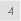
<style>
.page{position:relative;width:21px;height:21px;background:#e0e0e0}
.page>*{position:absolute;margin:0}
.t1{font:10.7px "Arimo";color:#787878;scale:1.11 1}
</style>
<div class="page">
<p class="t1" style="left:8px;top:7px;width:5px;height:8px">4</p>
</div>
